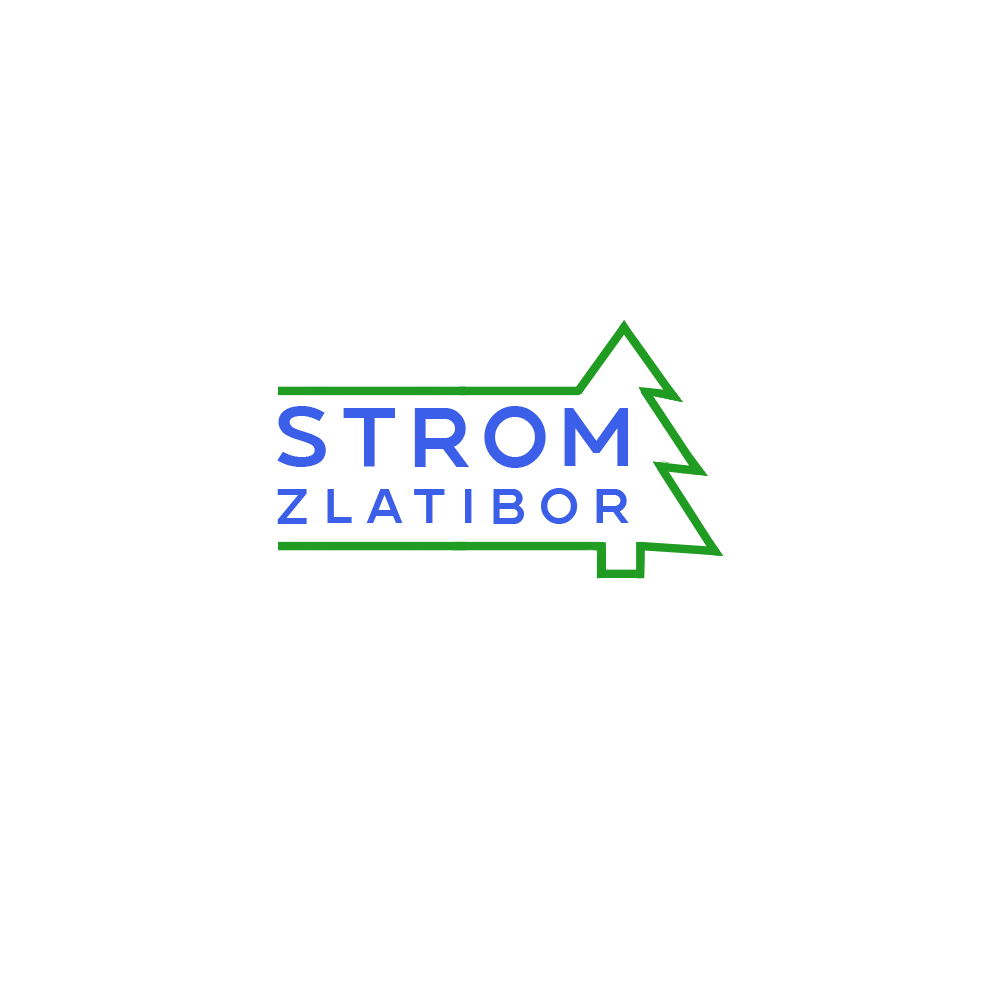
<style>
.page{position:relative;width:1000px;height:1000px;background:#ffffff}
.page>*{position:absolute;margin:0}
.t1{font:83.3px "ConneqtRegular";letter-spacing:0.1em;color:#3c5fea}
.t2{font:49.4px "ConneqtRegular";letter-spacing:0.25em;color:#3c5fea}
</style>
<div class="page">
<p class="t1" style="left:277px;top:406px;width:351px;height:62px">STROM</p>
<p class="t2" style="left:277px;top:488px;width:352px;height:36px">ZLATIBOR</p>
</div>
